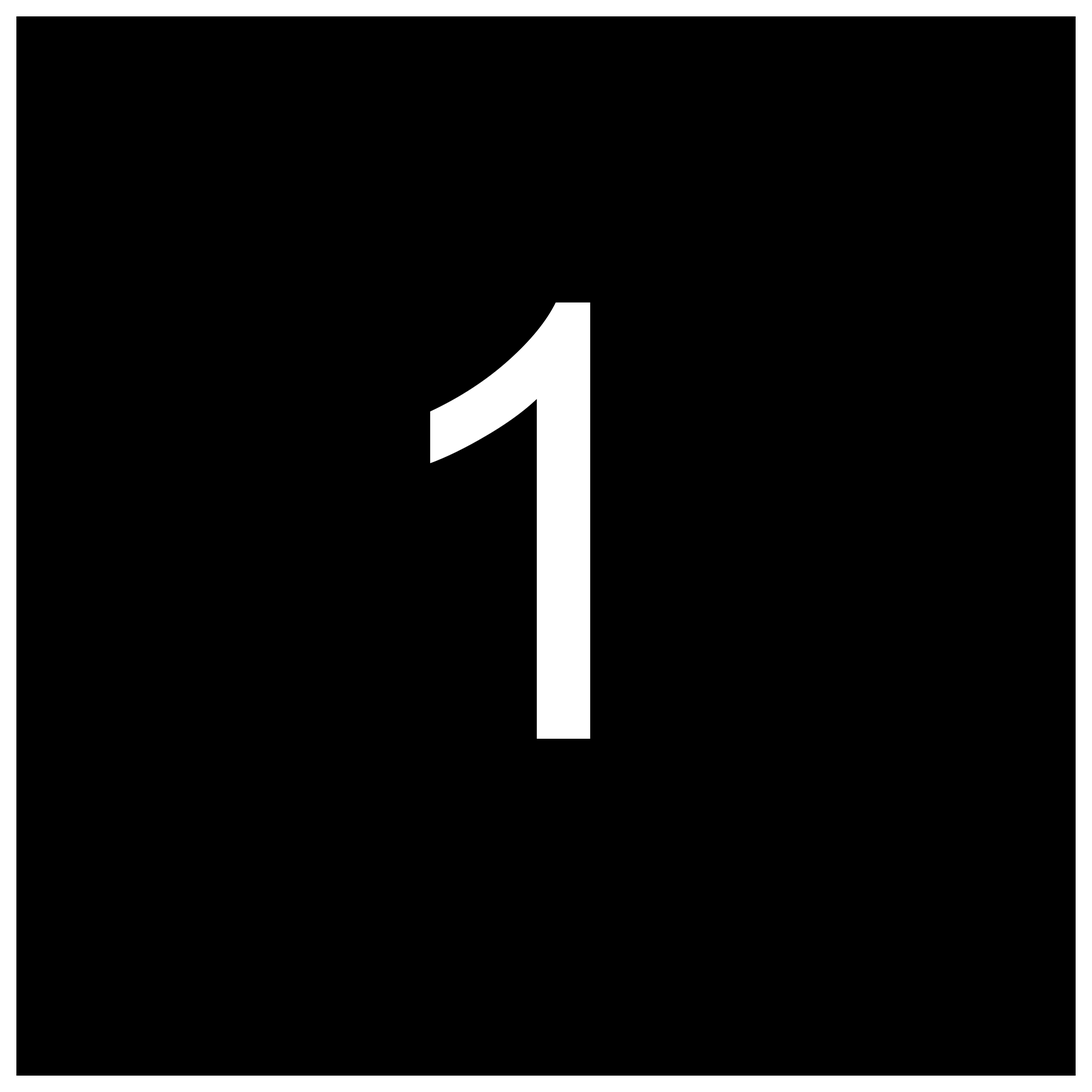
<style>
.page{position:relative;width:1092px;height:1092px;background:#000000}
.page>*{position:absolute;margin:0}
.t1{font:606.7px "ArialMT";color:#ffffff}
</style>
<div class="page">
<p class="t1" style="left:430px;top:302px;width:160px;height:437px">1</p>
</div>
